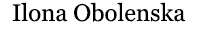
<style>
.page{position:relative;width:200px;height:30px;background:#ffffff}
.page>*{position:absolute;margin:0}
.t1{font:24px "Georgia";color:#000000}
</style>
<div class="page">
<p class="t1" style="left:12px;top:2px;width:174px;height:20px">Ilona Obolenska</p>
</div>
